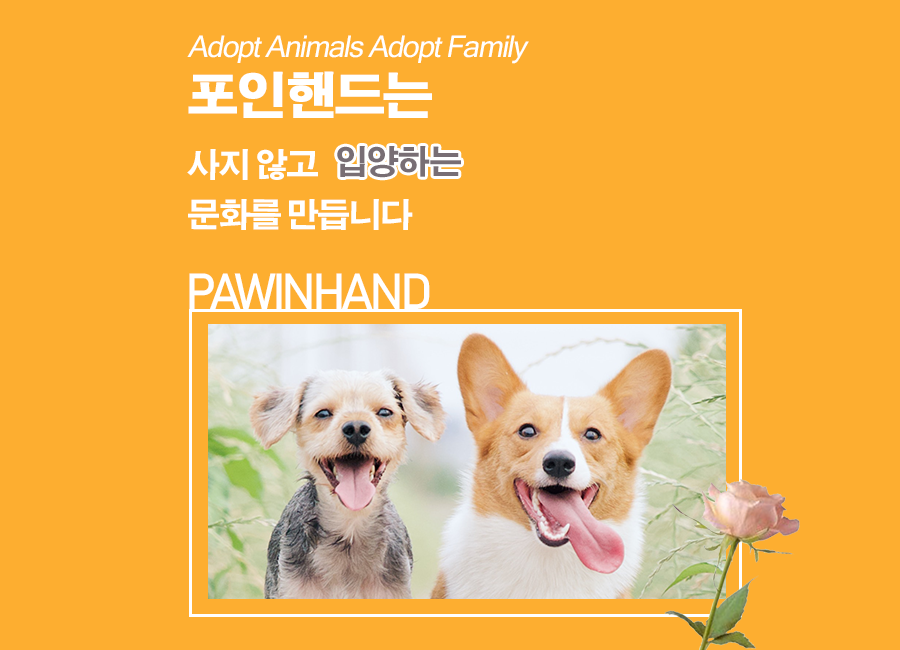
<style>
.page{position:relative;width:900px;height:650px;background:#fdae30}
.page>*{position:absolute;margin:0}
.t1{font:30px "MicrosoftSansSerif";letter-spacing:-0.05em;color:#ffffff;font-style:italic}
.t2{font:50px "H2gtrE";letter-spacing:-0.05em;color:#ffffff;font-weight:bold}
.t3{font:33px/50px "AdobeGothicStd-Bold";letter-spacing:-0.05em;color:#ffffff}
.t4{font:33px "AdobeGothicStd-Bold";letter-spacing:-0.05em;color:#786e74}
.t5{font:50px "Bahnschrift";letter-spacing:-0.09em;color:#ffffff}
</style>
<div class="page">
<p class="t1" style="left:187px;top:35px;width:342px;height:29px">Adopt Animals Adopt Family</p>
<p class="t2" style="left:188px;top:71px;width:244px;height:47px">포인핸드는</p>
<p class="t3" style="left:187px;top:149px;width:226px;height:81px">사지 않고 <br>문화를 만듭니다</p>
<p class="t4" style="left:337px;top:146px;width:124px;height:32px">입양하는</p>
<p class="t5" style="left:189px;top:273px;width:241px;height:36px">PAWINHAND</p>
</div>
